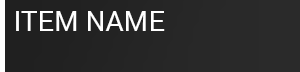
<style>
.page{position:relative;width:300px;height:72px}
.page>*{position:absolute;margin:0}
.t1{font:28px "Roboto-Regular";color:#ffffff;text-transform:uppercase}
</style>
<div class="page">
<p class="t1" style="left:16px;top:11px;width:149px;height:20px">ITEM NAME</p>
</div>
